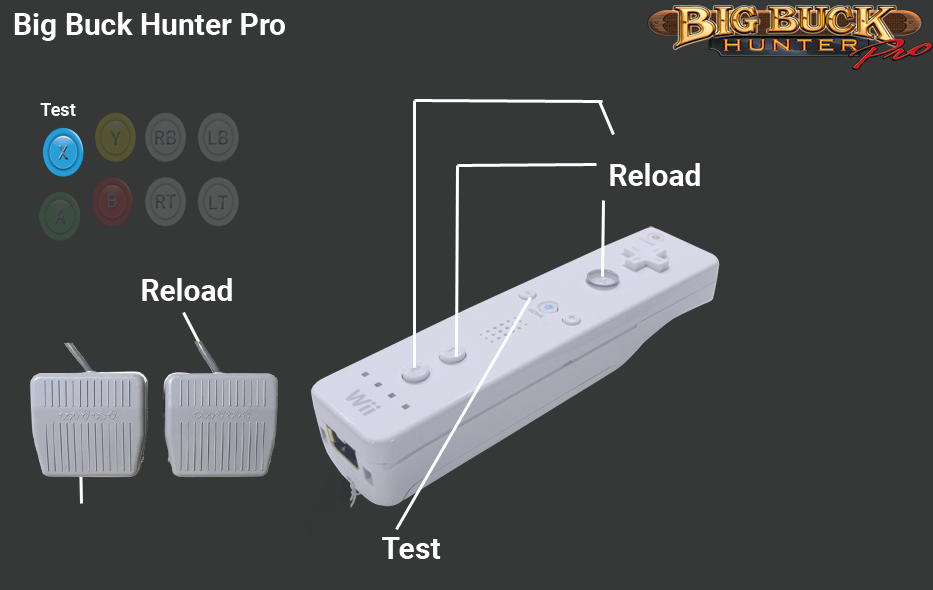
<style>
.page{position:relative;width:933px;height:590px;background:#363838}
.page>*{position:absolute;margin:0}
.t1{font:30px "Roboto-Bold";color:#ffffff}
.t2{font:18px "Roboto-Bold";color:#ffffff}
</style>
<div class="page">
<p class="t1" style="left:14px;top:12px;width:271px;height:29px">Big Buck Hunter Pro</p>
<p class="t2" style="left:40px;top:103px;width:36px;height:13px">Test</p>
<p class="t1" style="left:610px;top:163px;width:90px;height:23px">Reload</p>
<p class="t1" style="left:142px;top:278px;width:90px;height:23px">Reload</p>
<p class="t1" style="left:382px;top:537px;width:59px;height:22px">Test</p>
</div>
